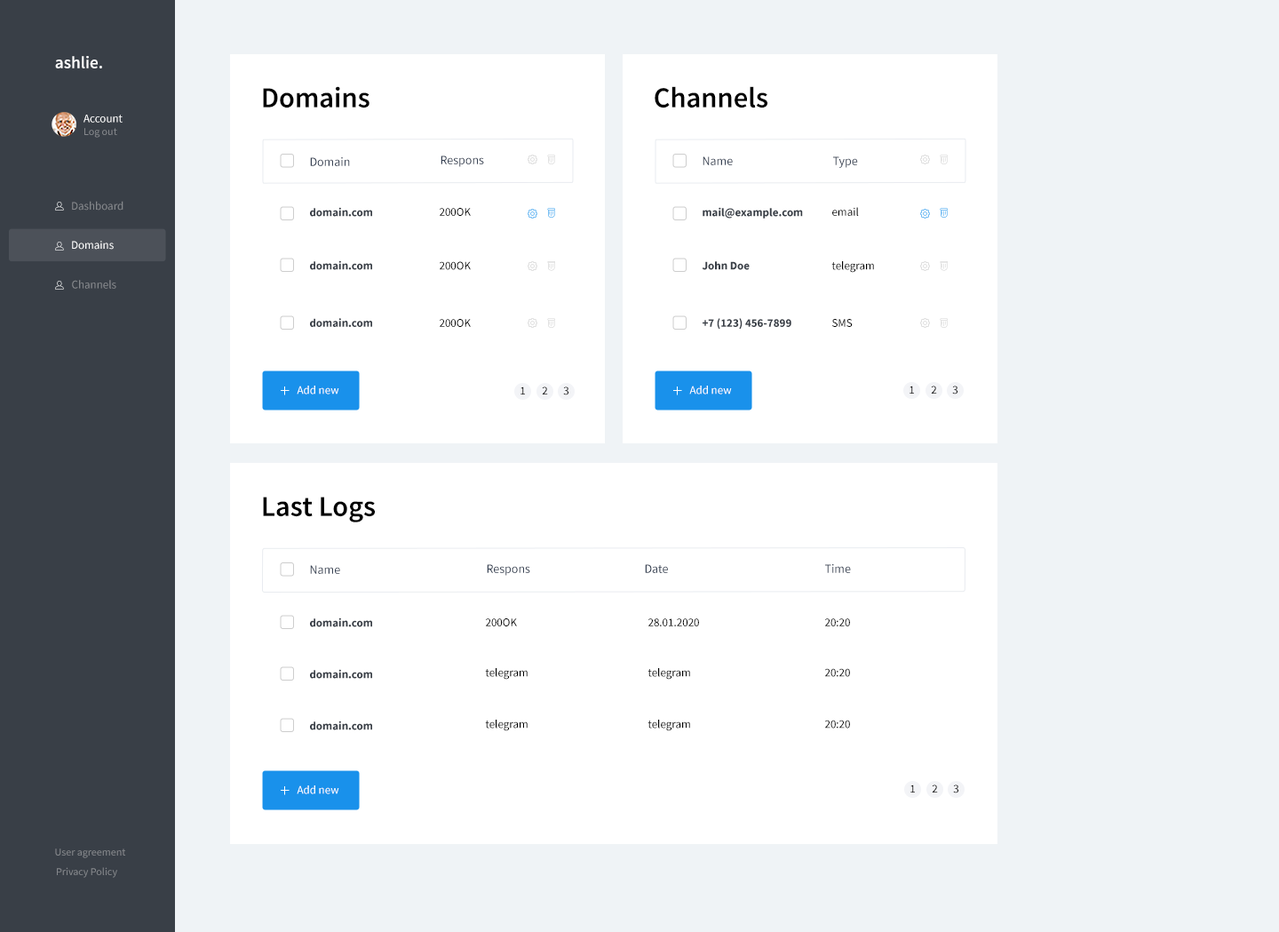
<style>
.page{position:relative;width:1279px;height:932px;background:#ffffff}
.page>*{position:absolute;margin:0}
.t1{font:17.1px "SourceSansPro-SemiBold";color:#ffffff}
.t2{font:28.9px "SourceSansPro-SemiBold";color:#000000}
.t3{font:11.6px "SourceSansPro-Regular";color:#ffffff}
.t4{font:10.7px "SourceSansPro-Regular";color:#85888c}
.t5{font:12.4px "SourceSansPro-Regular";color:#354052}
.t6{font:11.6px "SourceSansPro-Regular";color:#85888c}
.t7{font:11.6px "SourceSansPro-Bold";color:#393f47}
.t8{font:11.6px "SourceSansPro-Regular";color:#000000}
.t9{font:11.6px "SourceSansPro-Regular"}
.t10{font:12.4px "SourceSansPro-Regular"}
</style>
<div class="page">
<p class="t1" style="left:55px;top:56px;width:47px;height:12px">ashlie.</p>
<p class="t2" style="left:263px;top:86px;width:107px;height:22px">Domains</p>
<p class="t2" style="left:655px;top:86px;width:113px;height:22px">Channels</p>
<p class="t3" style="left:84px;top:115px;width:39px;height:8px">Account</p>
<p class="t4" style="left:84px;top:128px;width:33px;height:10px">Log out</p>
<p class="t5" style="left:310px;top:157px;width:40px;height:9px">Domain</p>
<p class="t5" style="left:441px;top:155px;width:43px;height:12px">Respons</p>
<p class="t5" style="left:703px;top:156px;width:30px;height:9px">Name</p>
<p class="t5" style="left:833px;top:156px;width:25px;height:12px">Type</p>
<p class="t6" style="left:72px;top:201px;width:51px;height:10px">Dashboard</p>
<p class="t7" style="left:310px;top:207px;width:62px;height:10px">domain.com</p>
<p class="t8" style="left:440px;top:208px;width:31px;height:8px">200OK</p>
<p class="t7" style="left:703px;top:207px;width:100px;height:12px">mail@example.com</p>
<p class="t8" style="left:833px;top:207px;width:26px;height:9px">email</p>
<p class="t3" style="left:72px;top:241px;width:42px;height:9px">Domains</p>
<p class="t7" style="left:310px;top:260px;width:62px;height:10px">domain.com</p>
<p class="t8" style="left:440px;top:261px;width:31px;height:9px">200OK</p>
<p class="t7" style="left:702px;top:261px;width:48px;height:9px">John Doe</p>
<p class="t8" style="left:832px;top:261px;width:42px;height:12px">telegram</p>
<p class="t6" style="left:72px;top:280px;width:44px;height:9px">Channels</p>
<p class="t7" style="left:310px;top:318px;width:62px;height:9px">domain.com</p>
<p class="t8" style="left:440px;top:319px;width:31px;height:8px">200OK</p>
<p class="t7" style="left:703px;top:318px;width:89px;height:12px">+7 (123) 456-7899</p>
<p class="t8" style="left:833px;top:319px;width:20px;height:8px">SMS</p>
<p class="t3" style="left:297px;top:386px;width:42px;height:8px">Add new</p>
<p class="t8" style="left:521px;top:386px;width:4px;height:8px">1</p>
<p class="t9" style="left:542px;top:386px;width:6px;height:8px">2</p>
<p class="t8" style="left:563px;top:386px;width:6px;height:9px">3</p>
<p class="t3" style="left:689px;top:386px;width:43px;height:8px">Add new</p>
<p class="t8" style="left:910px;top:386px;width:4px;height:8px">1</p>
<p class="t9" style="left:931px;top:386px;width:6px;height:8px">2</p>
<p class="t8" style="left:952px;top:386px;width:6px;height:8px">3</p>
<p class="t2" style="left:263px;top:497px;width:112px;height:25px">Last Logs</p>
<p class="t5" style="left:310px;top:565px;width:30px;height:9px">Name</p>
<p class="t5" style="left:487px;top:564px;width:43px;height:12px">Respons</p>
<p class="t5" style="left:645px;top:564px;width:23px;height:9px">Date</p>
<p class="t10" style="left:825px;top:564px;width:26px;height:9px">Time</p>
<p class="t7" style="left:310px;top:617px;width:62px;height:10px">domain.com</p>
<p class="t8" style="left:486px;top:618px;width:31px;height:8px">200OK</p>
<p class="t8" style="left:649px;top:618px;width:50px;height:8px">28.01.2020</p>
<p class="t8" style="left:825px;top:618px;width:25px;height:8px">20:20</p>
<p class="t7" style="left:310px;top:669px;width:62px;height:10px">domain.com</p>
<p class="t8" style="left:485px;top:668px;width:43px;height:12px">telegram</p>
<p class="t8" style="left:648px;top:668px;width:42px;height:12px">telegram</p>
<p class="t8" style="left:825px;top:668px;width:25px;height:9px">20:20</p>
<p class="t7" style="left:310px;top:721px;width:62px;height:9px">domain.com</p>
<p class="t8" style="left:485px;top:720px;width:43px;height:11px">telegram</p>
<p class="t8" style="left:648px;top:720px;width:42px;height:11px">telegram</p>
<p class="t8" style="left:825px;top:720px;width:25px;height:9px">20:20</p>
<p class="t3" style="left:297px;top:785px;width:42px;height:9px">Add new</p>
<p class="t8" style="left:911px;top:785px;width:4px;height:8px">1</p>
<p class="t9" style="left:932px;top:785px;width:6px;height:8px">2</p>
<p class="t8" style="left:953px;top:785px;width:6px;height:8px">3</p>
<p class="t4" style="left:55px;top:848px;width:71px;height:10px">User agreement</p>
<p class="t4" style="left:57px;top:867px;width:60px;height:11px">Privacy Policy</p>
</div>
